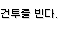
<style>
.page{position:relative;width:64px;height:30px;background:#ffffff}
.page>*{position:absolute;margin:0}
.t1{font:10px "Galmuri9-Regular";color:#000000}
</style>
<div class="page">
<p class="t1" style="left:1px;top:9px;width:56px;height:9px">건투를 빈다.</p>
</div>
